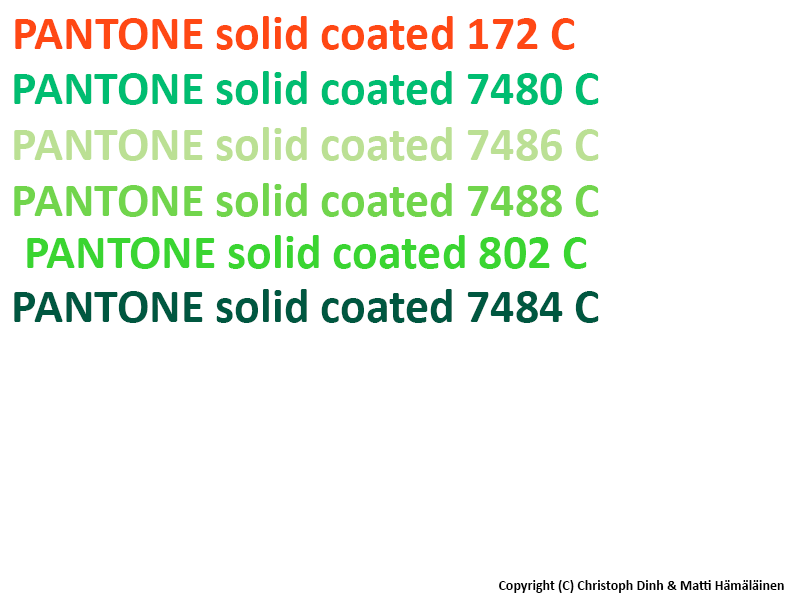
<style>
.page{position:relative;width:800px;height:600px;background:#ffffff}
.page>*{position:absolute;margin:0}
.t1{font:48px "Calibri-Bold";color:#ff4814}
.t2{font:48px "Calibri-Bold";color:#00bd71}
.t3{font:48px "Calibri-Bold";color:#bbe094}
.t4{font:48px "Calibri-Bold";color:#71d54c}
.t5{font:48px "Calibri-Bold";color:#3ad531}
.t6{font:48px "Calibri-Bold";color:#005740}
.t7{font:14px "Calibri-Bold";color:#000000}
</style>
<div class="page">
<p class="t1" style="left:15px;top:16px;width:560px;height:34px">PANTONE solid coated 172 C</p>
<p class="t2" style="left:14px;top:71px;width:585px;height:34px">PANTONE solid coated 7480 C</p>
<p class="t3" style="left:14px;top:127px;width:585px;height:34px">PANTONE solid coated 7486 C</p>
<p class="t4" style="left:14px;top:183px;width:585px;height:34px">PANTONE solid coated 7488 C</p>
<p class="t5" style="left:27px;top:235px;width:560px;height:34px">PANTONE solid coated 802 C</p>
<p class="t6" style="left:14px;top:289px;width:585px;height:34px">PANTONE solid coated 7484 C</p>
<p class="t7" style="left:499px;top:580px;width:285px;height:13px">Copyright (C) Christoph Dinh &amp; Matti Hämäläinen</p>
</div>
